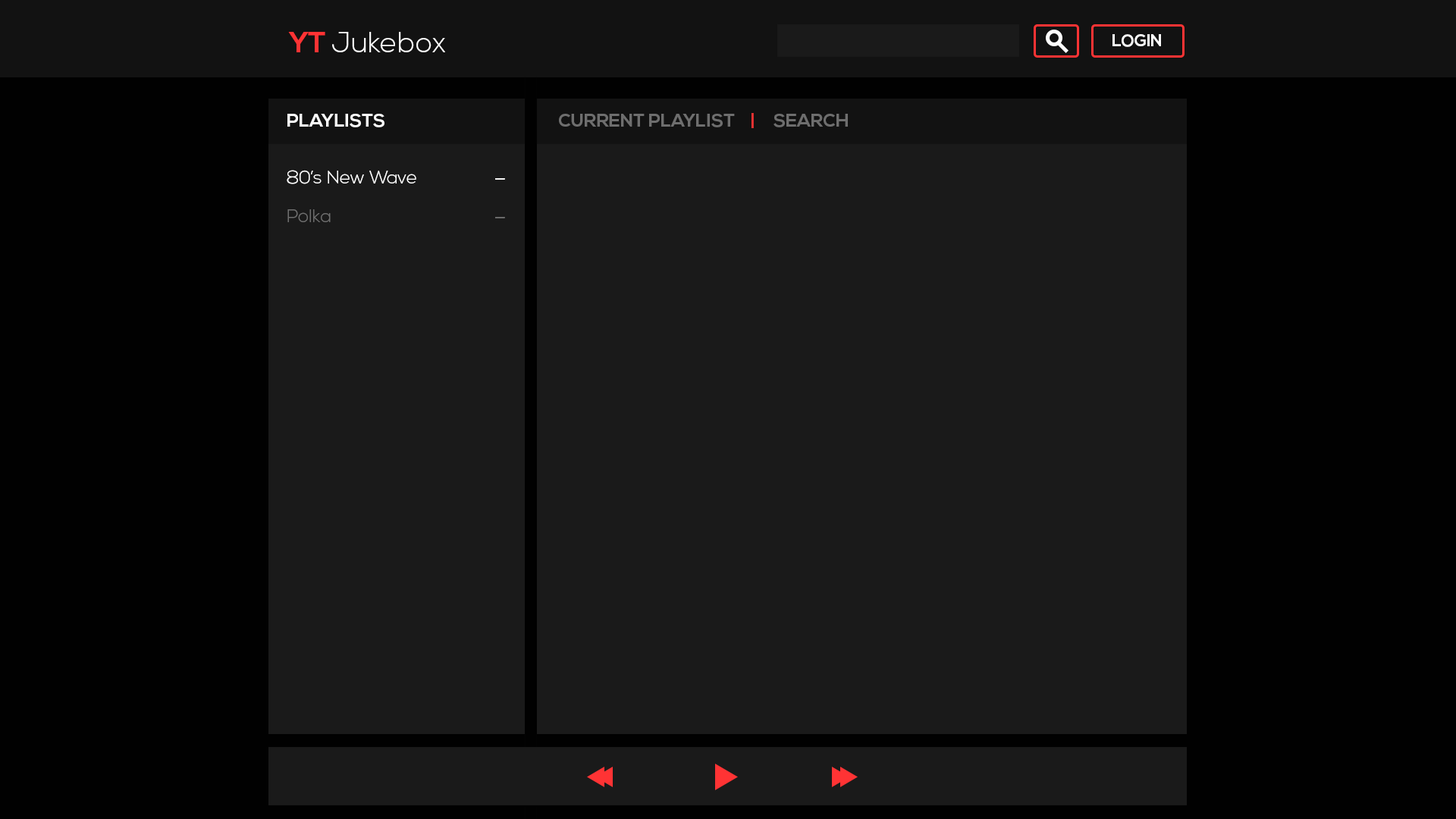
<style>
.page{position:relative;width:1456px;height:819px;background:#1a1a1a}
.page>*{position:absolute;margin:0}
.t1{font:28.8px "NexaLight";color:#ffffff}
.t2{font:28.8px "NexaBold";color:#ff3334}
.t3{font:16.7px "NexaBold";color:#ffffff}
.t4{font:18.2px "NexaBold";color:#ffffff}
.t5{font:18.2px "NexaBold";color:#6e6e6e}
.t6{font:18.2px "NexaBold";color:#ff3334}
.t7{font:18.2px "NexaLight";color:#ffffff}
.t8{font:27.3px "NexaLight";color:#ffffff}
.t9{font:18.2px "NexaLight";color:#6e6e6e}
.t10{font:27.3px "NexaLight";color:#6e6e6e}
</style>
<div class="page">
<p class="t1" style="left:288px;top:32px;width:157px;height:20px"><span class="t2">YT </span>Jukebox</p>
<p class="t3" style="left:1112px;top:34px;width:49px;height:13px">LOGIN</p>
<p class="t4" style="left:287px;top:114px;width:97px;height:13px">PLAYLISTS</p>
<p class="t5" style="left:559px;top:114px;width:176px;height:13px">CURRENT PLAYLIST</p>
<p class="t6" style="left:751px;top:113px;width:3px;height:15px">|</p>
<p class="t5" style="left:773px;top:114px;width:75px;height:13px">SEARCH</p>
<p class="t7" style="left:287px;top:170px;width:129px;height:14px">80’s New Wave</p>
<p class="t8" style="left:495px;top:178px;width:10px;height:2px">-</p>
<p class="t9" style="left:287px;top:209px;width:44px;height:13px">Polka</p>
<p class="t10" style="left:495px;top:217px;width:10px;height:1px">-</p>
</div>
